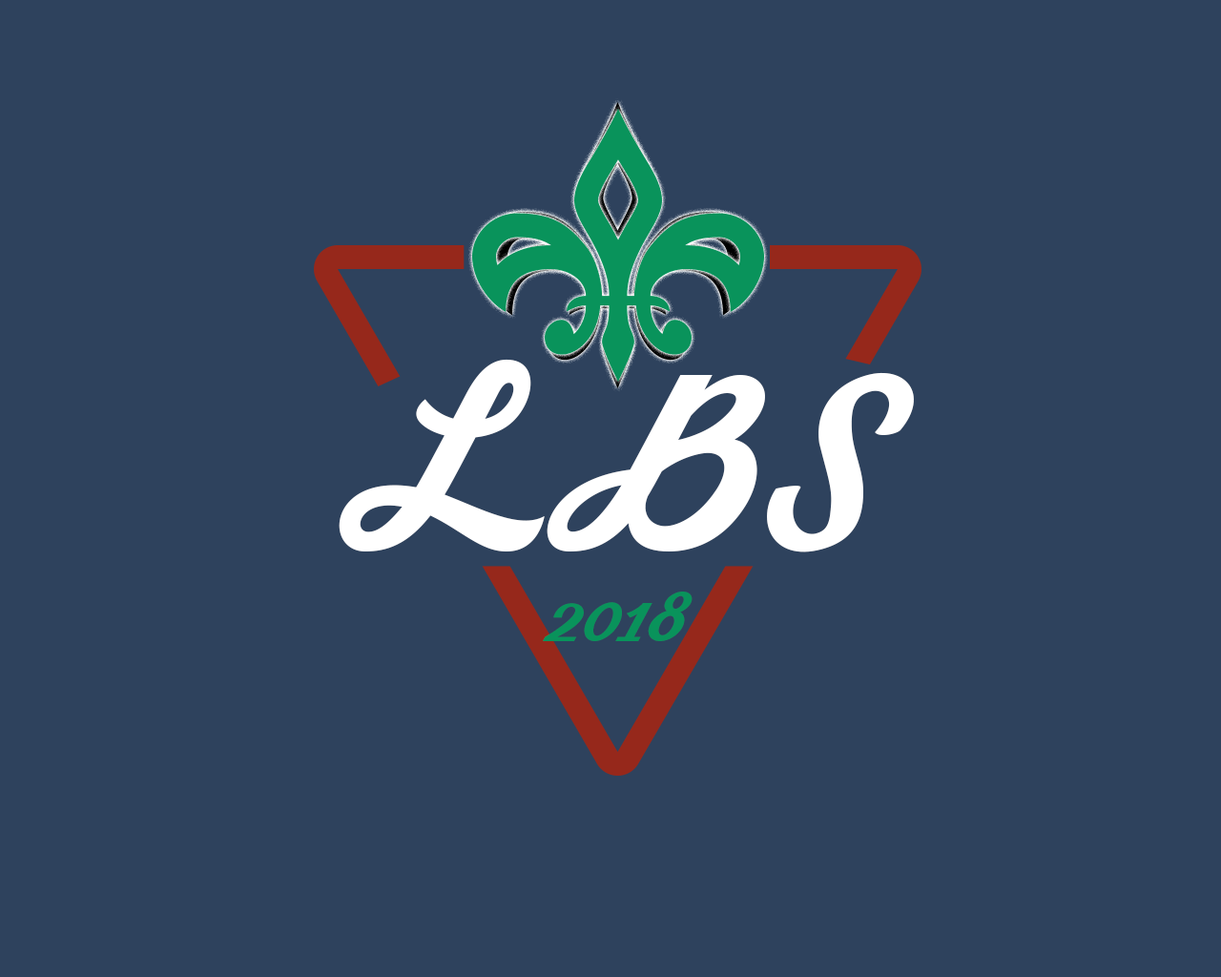
<style>
.page{position:relative;width:1221px;height:977px;background:#2e425d}
.page>*{position:absolute;margin:0}
.t1{font:178.5px "Streetwear";color:#ffffff}
.t2{font:57.2px "Streetwear";color:#09935b}
</style>
<div class="page">
<p class="t1" style="left:339px;top:359px;width:575px;height:193px">LBS</p>
<p class="t2" style="left:543px;top:591px;width:149px;height:50px">2018</p>
</div>
